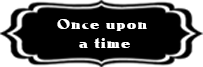
<style>
.page{position:relative;width:203px;height:67px;background:#000000}
.page>*{position:absolute;margin:0}
.t1{font:14px "Notram";letter-spacing:0.1em;color:#ffffff}
</style>
<div class="page">
<p class="t1" style="left:57px;top:19px;width:90px;height:29px;text-align:center">Once upon <br>a time</p>
</div>
